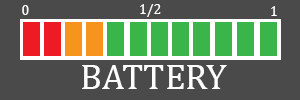
<style>
.page{position:relative;width:300px;height:100px;background:#4a4a4a}
.page>*{position:absolute;margin:0}
.t1{font:14px "CambriaMath";color:#ffffff}
.t2{font:36px "CambriaMath";color:#ffffff}
</style>
<div class="page">
<p class="t1" style="left:22px;top:5px;width:7px;height:10px">0</p>
<p class="t1" style="left:140px;top:4px;width:21px;height:13px">1/2</p>
<p class="t1" style="left:271px;top:6px;width:6px;height:10px">1</p>
<p class="t2" style="left:82px;top:65px;width:145px;height:24px">BATTERY</p>
</div>
